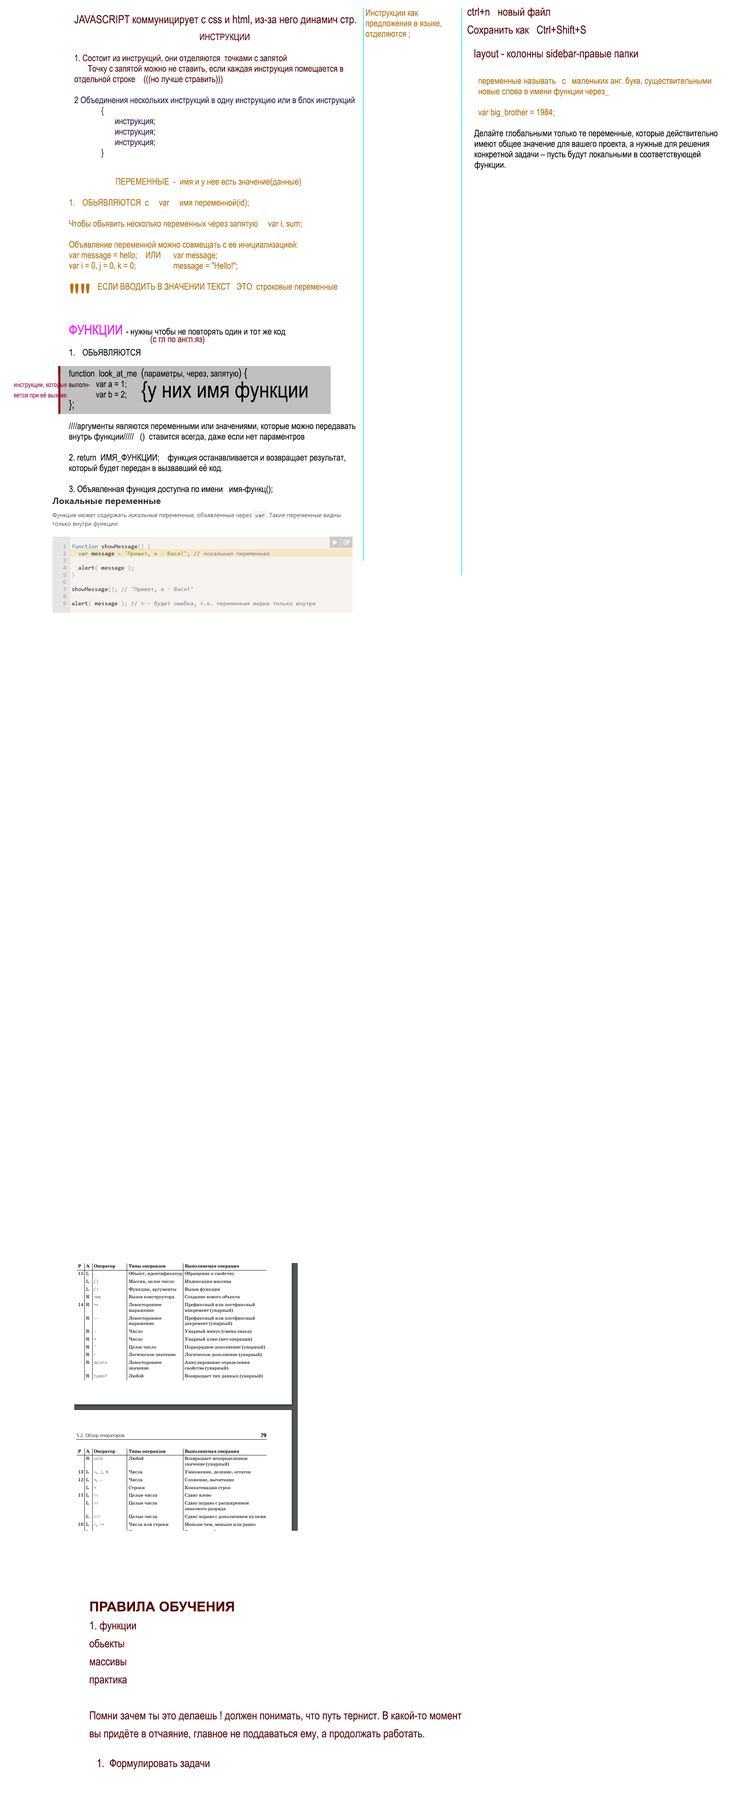
<style>
.page{position:relative;width:750px;height:1800px;background:#ffffff}
.page>*{position:absolute;margin:0}
.t1{font:11.2px "ArialNarrow";color:#590000}
.t2{font:9px/10.5px "ArialNarrow";color:#b57300}
.t3{font:11.2px/18px "ArialNarrow";color:#590000}
.t4{font:9px/10.5px "ArialNarrow";color:#590000}
.t5{font:9px/10.5px "ArialNarrow";color:#381951}
.t6{font:9px/10.5px "ArialNarrow";color:#000000}
.t7{font:37.5px/10.5px "ArialNarrow";color:#b57300}
.t8{font:13.5px/10.5px "ArialNarrow";color:#f600ff}
.t9{font:11.2px/10.5px "ArialNarrow";color:#000000}
.t10{font:22.5px/10.5px "ArialNarrow";color:#000000}
.t11{font:9px "ArialNarrow";color:#830000}
.t12{font:6.8px/10.5px "ArialNarrow";color:#a20050}
.t13{font:6.8px/10.5px "ArialNarrow";color:#2f0017}
.t14{font:13.5px/18px "Arial-BoldMT";color:#590000}
</style>
<div class="page">
<p class="t1" style="left:74px;top:15px;width:282px;height:11px">JAVASCRIPT коммуницирует с css и html, из-за него динамич стр.</p>
<p class="t2" style="left:366px;top:9px;width:75px;height:29px">Инструкции как предложения в языке, отделяются ;</p>
<p class="t3" style="left:467px;top:8px;width:119px;height:28px">ctrl+n   новый файл <br>Сохранить как   Ctrl+Shift+S</p>
<p class="t4" style="left:74px;top:33px;width:281px;height:125px;text-align:center">ИНСТРУКЦИИ<br><br>1. Состоит из инструкций, они отделяются  точками с запятой<br> Точку с запятой можно не ставить, если каждая инструкция помещается в отдельной строке    (((но лучше стравить)))<br><span class="t5"><br>2 Объединения нескольких инструкций в одну инструкцию или в блок инструкций<br>  {<br>   инструкция;<br>   инструкция;<br>   инструкция;<br>  }</span></p>
<p class="t1" style="left:474px;top:49px;width:164px;height:11px">layout - колонны sidebar-правые папки</p>
<p class="t2" style="left:478px;top:77px;width:233px;height:40px">переменные называть   с   маленьких анг. букв, существительными <br>новые слова в имени функции через_<br><br>var big_brother = 1984;</p>
<p class="t6" style="left:474px;top:129px;width:244px;height:41px">Делайте глобальными только те переменные, которые действительно имеют общее значение для вашего проекта, а нужные для решения конкретной задачи – пусть будут локальными в соответствующей функции.</p>
<p class="t2" style="left:69px;top:178px;width:269px;height:116px;text-align:center">ПЕРЕМЕННЫЕ  -  имя и у нее есть значение(данные)<br> <br>1. ОБЬЯВЛЯЮТСЯ  c     var     имя переменной(id);<br><br>Чтобы обьявить несколько переменных через запятую     var i, sum;<br><br>Объявление переменной можно совмещать с ее инициализацией:<br>var message = hello;    ИЛИ      <br>var i = 0, j = 0, k = 0;<br><br>              ЕСЛИ ВВОДИТЬ В ЗНАЧЕНИИ ТЕКСТ   ЭТО  строковые переменные<br><br><span class="t7">""</span></p>
<p class="t2" style="left:173px;top:253px;width:64px;height:18px">var message;         message = "Hello!";</p>
<p class="t6" style="left:69px;top:325px;width:287px;height:169px"><span class="t8">ФУНКЦИИ </span>- нужны чтобы не повторять один и тот же код<br><br>1. ОБЬЯВЛЯЮТСЯ  <br><br>function  look_at_me  <span class="t9">(</span>параметры, через, запятую<span class="t9">) {<br></span>  var a = 1;<br>  var b = 2;  <span class="t10">  {у них имя функции<br></span><span class="t9">};<br></span><br>////аргументы являются переменными или значениями, которые можно передавать внутрь функции/////   ()  ставится всегда, даже если нет параментров<br><br>2. return  ИМЯ_ФУНКЦИИ;    функция останавливается и возвращает результат, который будет передан в вызвавший её код.<br><br>3. Объявленная функция доступна по имени   имя-функц();</p>
<p class="t11" style="left:150px;top:335px;width:54px;height:9px">(с гл по англ.яз)</p>
<p class="t12" style="left:14px;top:383px;width:76px;height:16px">инструкции, которые <span class="t13">выполн-              </span>яется при её вызове.</p>
<p class="t3" style="left:89px;top:1601px;width:373px;height:139px"><span class="t14">ПРАВИЛА ОБУЧЕНИЯ<br></span>1. функции<br>обьекты <br>массивы<br>практика<br><br>Помни зачем ты это делаешь ! должен понимать, что путь тернист. В какой-то момент вы придёте в отчаяние, главное не поддаваться ему, а продолжать работать.</p>
<p class="t1" style="left:98px;top:1759px;width:112px;height:11px">1.  Формулировать задачи</p>
</div>
